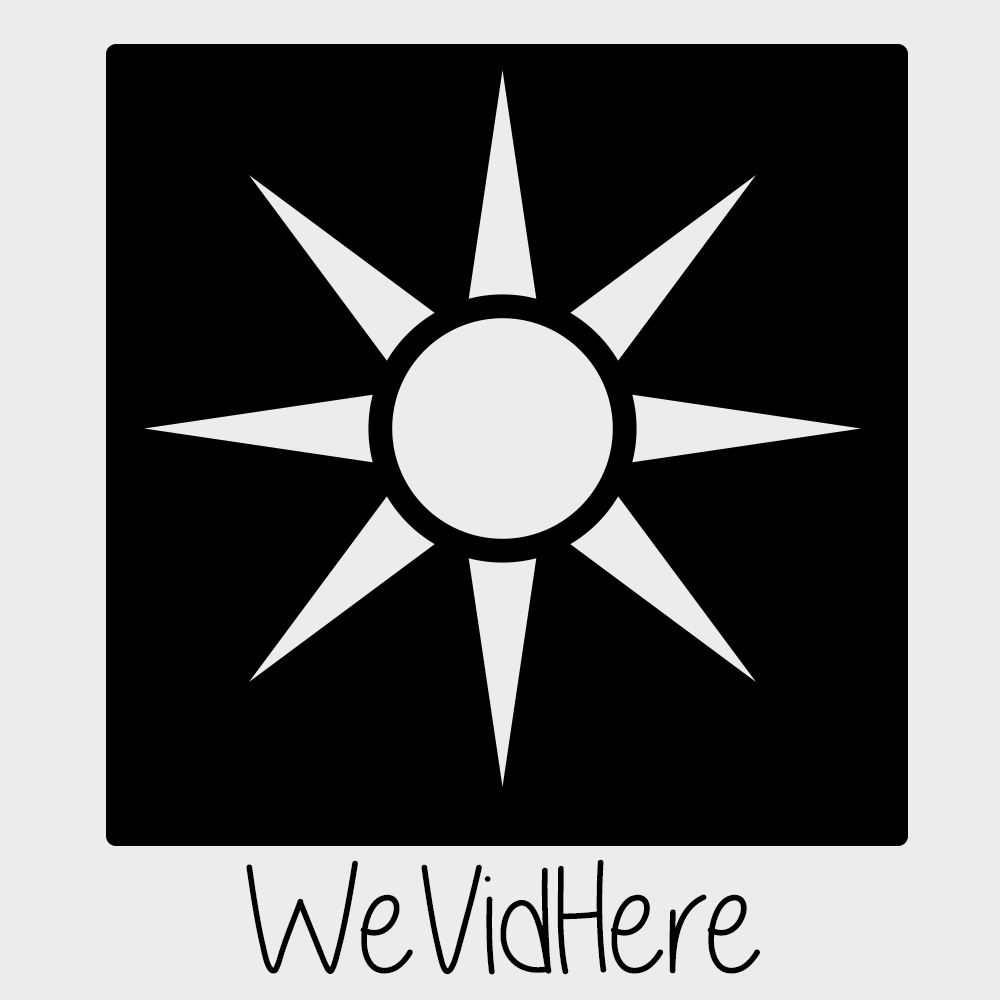
<style>
.page{position:relative;width:1000px;height:1000px;background:#000000}
.page>*{position:absolute;margin:0}
.t1{font:153px "Alittlesunshine";color:#010101}
</style>
<div class="page">
<p class="t1" style="left:246px;top:859px;width:514px;height:116px">WeVidHere</p>
</div>
